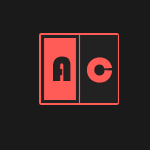
<style>
.page{position:relative;width:150px;height:150px;background:#1a1a1a}
.page>*{position:absolute;margin:0}
.t1{font:36px "Bauhaus93";color:#222222}
.t2{font:36px "Bauhaus93";color:#ff5b57}
</style>
<div class="page">
<p class="t1" style="left:53px;top:56px;width:18px;height:25px">A</p>
<p class="t2" style="left:87px;top:57px;width:25px;height:26px">C</p>
</div>
